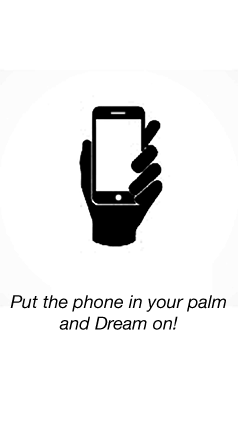
<style>
.page{position:relative;width:238px;height:423px;background:#ffffff}
.page>*{position:absolute;margin:0}
.t1{font:18px "HelveticaNeue-Italic";color:#000000}
</style>
<div class="page">
<p class="t1" style="left:10px;top:295px;width:216px;height:35px;text-align:center">Put the phone in your palm<br>and Dream on!</p>
</div>
